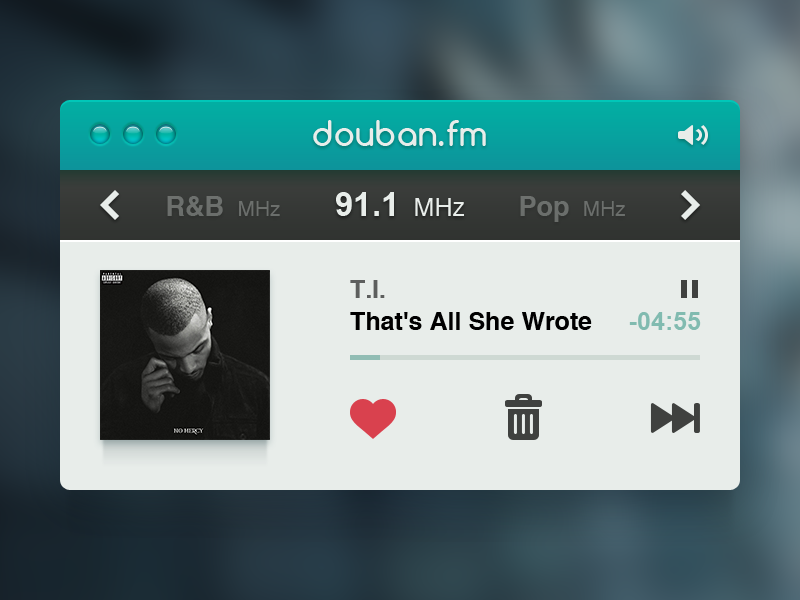
<style>
.page{position:relative;width:800px;height:600px;background:#e8edea}
.page>*{position:absolute;margin:0}
.t1{font:33.3px "Comfortaa-Bold";letter-spacing:0.02em;color:#e8edea}
.t2{font:27.1px "Helvetica-Bold";color:#6c6f6c}
.t3{font:20.8px "Helvetica";color:#6c6f6c}
.t4{font:33.3px "Arial-BoldMT";color:#e8edea}
.t5{font:25px "Helvetica";color:#e8edea}
.t6{font:25px "Helvetica-Bold";color:#5d5f5e}
.t7{font:25px "Helvetica-Bold";color:#000000}
.t8{font:25px "Arial-BoldMT";color:#81bbb0}
</style>
<div class="page">
<p class="t1" style="left:313px;top:120px;width:173px;height:26px">douban.fm</p>
<p class="t2" style="left:167px;top:196px;width:113px;height:20px">R&amp;B  <span class="t3">MHz</span></p>
<p class="t4" style="left:336px;top:192px;width:128px;height:24px">91.1<span class="t5">  MHz</span></p>
<p class="t2" style="left:520px;top:196px;width:105px;height:26px">Pop  <span class="t3">MHz</span></p>
<p class="t6" style="left:350px;top:280px;width:35px;height:18px">T.I.</p>
<p class="t7" style="left:350px;top:312px;width:242px;height:18px">That's All She Wrote</p>
<p class="t8" style="left:629px;top:312px;width:72px;height:18px">-04:55</p>
</div>
